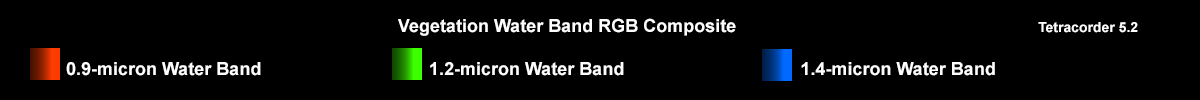
<style>
.page{position:relative;width:1200px;height:100px;background:#000000}
.page>*{position:absolute;margin:0}
.t1{font:18px "Arial-BoldMT";color:#fffefe}
.t2{font:14px "Arial-BoldMT";color:#fffefe}
</style>
<div class="page">
<p class="t1" style="left:398px;top:18px;width:338px;height:18px">Vegetation Water Band RGB Composite</p>
<p class="t2" style="left:1038px;top:22px;width:100px;height:11px">Tetracorder 5.2</p>
<p class="t1" style="left:66px;top:62px;width:195px;height:14px">0.9-micron Water Band</p>
<p class="t1" style="left:430px;top:62px;width:194px;height:14px">1.2-micron Water Band</p>
<p class="t1" style="left:801px;top:62px;width:194px;height:14px">1.4-micron Water Band</p>
</div>
